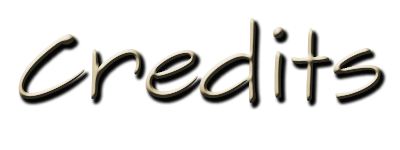
<style>
.page{position:relative;width:400px;height:150px;background:#ffffff}
.page>*{position:absolute;margin:0}
.t1{font:100px "SketchFlowPrint"}
</style>
<div class="page">
<p class="t1" style="left:18px;top:18px;width:363px;height:85px">Credits</p>
</div>
